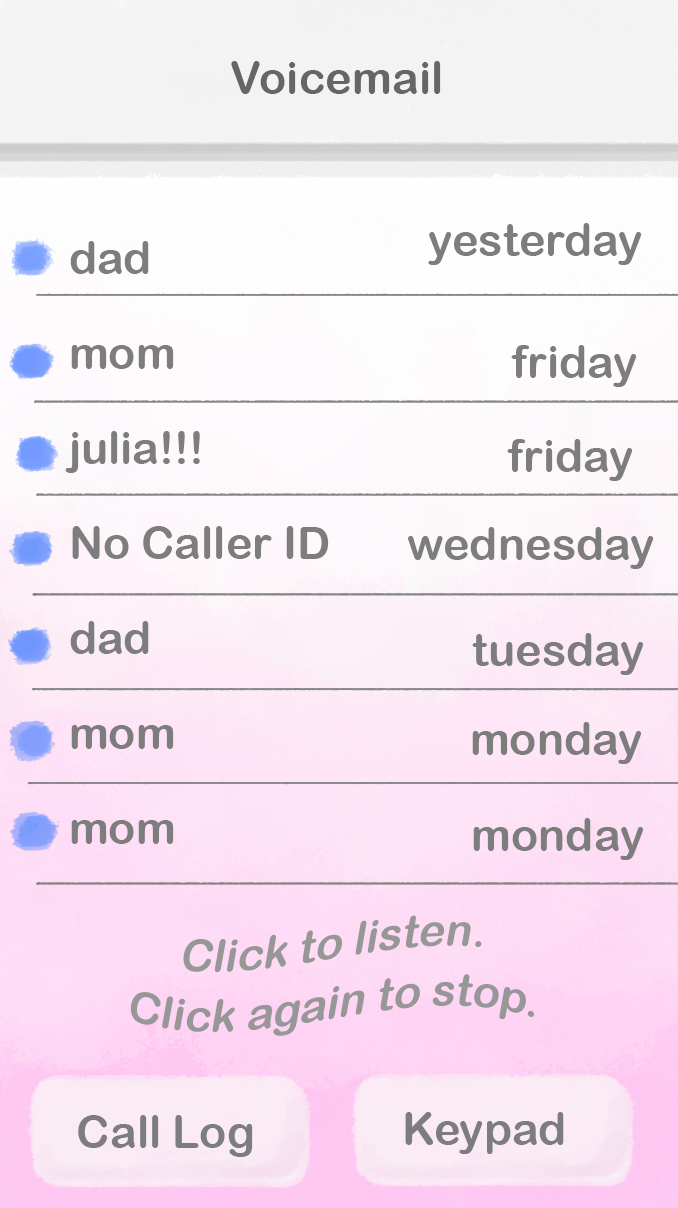
<style>
.page{position:relative;width:678px;height:1208px}
.page>*{position:absolute;margin:0}
.t1{font:45px "ArialRoundedMTBold";color:#666666}
.t2{font:45px "ArialRoundedMTBold";color:#7d7d7d}
.t3{font:45px/104px "ArialRoundedMTBold";color:#7d7d7d}
.t4{font:45px/69px "ArialRoundedMTBold";color:#979797;font-style:italic}
</style>
<div class="page">
<p class="t1" style="left:231px;top:61px;width:210px;height:33px">Voicemail</p>
<p class="t2" style="left:428px;top:223px;width:214px;height:42px">yesterday</p>
<p class="t3" style="left:65px;top:241px;width:264px;height:603px">dad<br>mom<br>julia!!!<br>No Caller ID<br>dad<br>mom<br>mom</p>
<p class="t2" style="left:511px;top:345px;width:126px;height:42px">friday</p>
<p class="t2" style="left:507px;top:439px;width:126px;height:42px">friday</p>
<p class="t2" style="left:408px;top:527px;width:246px;height:42px">wednesday</p>
<p class="t2" style="left:472px;top:633px;width:172px;height:42px">tuesday</p>
<p class="t2" style="left:472px;top:722px;width:170px;height:42px">monday</p>
<p class="t2" style="left:473px;top:818px;width:171px;height:42px">monday</p>
<p class="t4" style="left:130px;top:915px;width:404px;height:121px;text-align:center">Click to listen.<br>Click again to stop.</p>
<p class="t2" style="left:78px;top:1115px;width:175px;height:42px">Call Log</p>
<p class="t2" style="left:405px;top:1112px;width:159px;height:42px">Keypad</p>
</div>
